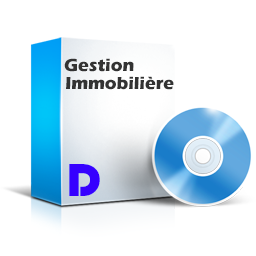
<style>
.page{position:relative;width:256px;height:256px;background:#ffffff}
.page>*{position:absolute;margin:0}
.t1{font:18px "ErasITC-Bold";color:#333333}
.t2{font:48px "Bauhaus93";color:#3600ff}
</style>
<div class="page">
<p class="t1" style="left:64px;top:58px;width:70px;height:14px">Gestion</p>
<p class="t1" style="left:66px;top:76px;width:108px;height:14px">Immobilière</p>
<p class="t2" style="left:69px;top:164px;width:31px;height:32px">D</p>
</div>
